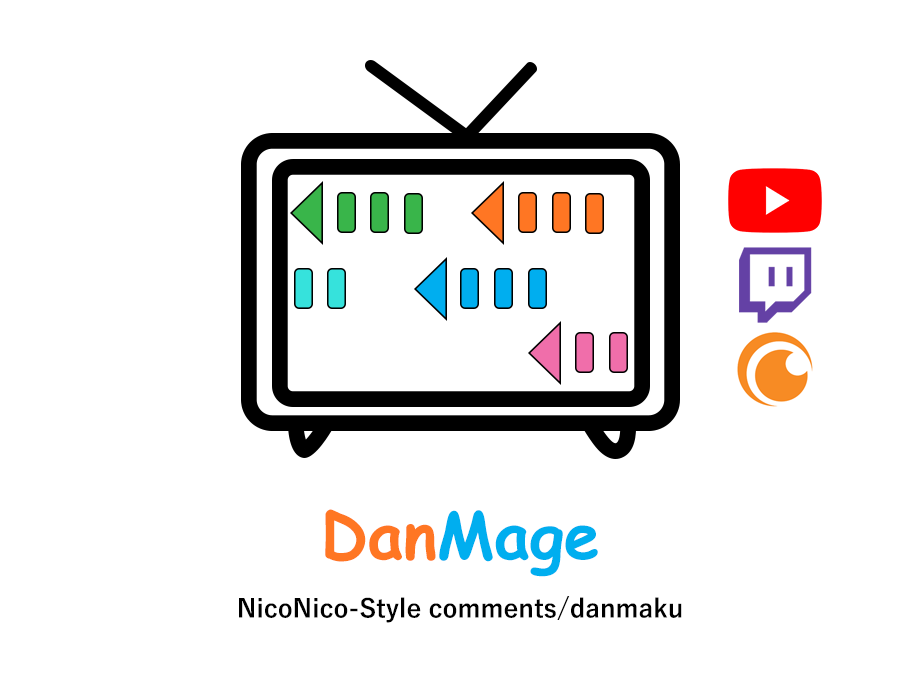
<style>
.page{position:relative;width:920px;height:680px;background:#ffffff}
.page>*{position:absolute;margin:0}
.t1{font:64.5px "ComicSansMS-Bold";color:#00aeef}
.t2{font:64.5px "ComicSansMS-Bold";color:#ff7623}
.t3{font:25.3px "YuGothic-Bold";color:#000000}
</style>
<div class="page">
<p class="t1" style="left:325px;top:509px;width:273px;height:68px"><span class="t2">Dan</span>Mage</p>
<p class="t3" style="left:239px;top:596px;width:443px;height:27px">NicoNico-Style comments/danmaku</p>
</div>
